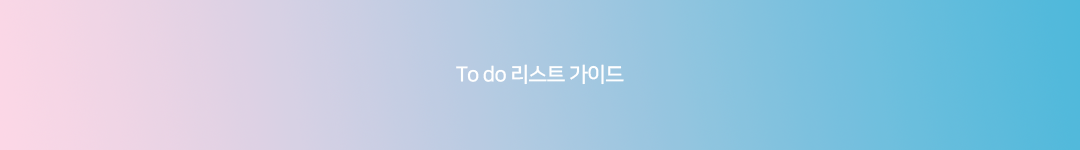
<style>
.page{position:relative;width:1080px;height:150px}
.page>*{position:absolute;margin:0}
.t1{font:20.8px "NanumSquareB";letter-spacing:-0.04em;color:#ffffff}
</style>
<div class="page">
<p class="t1" style="left:456px;top:64px;width:168px;height:21px">To do 리스트 가이드</p>
</div>
